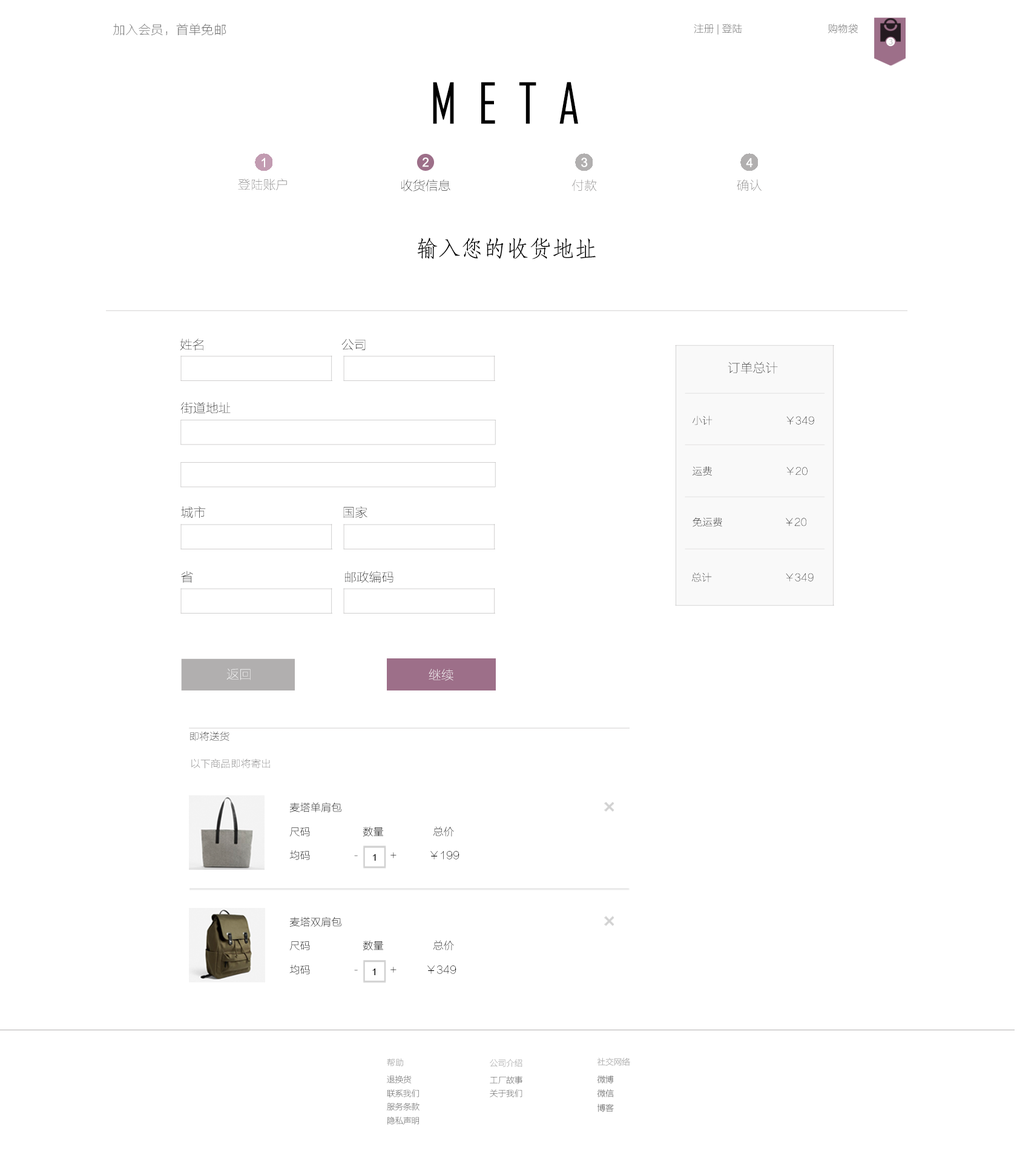
<style>
.page{position:relative;width:1017px;height:1172px;background:#ffffff}
.page>*{position:absolute;margin:0}
.t1{font:12.6px "FZLTCXHJW--GB1-0";color:#666666}
.t2{font:10.1px "FZLTCXHJW--GB1-0";color:#666666}
.t3{font:10.3px "ArialMT";color:#666666}
.t4{font:7.6px "Arial-BoldMT";color:#d1d1d1}
.t5{font:54px "AgencyFB-Reg";color:#000000}
.t6{font:12.6px "ArialMT";color:#ffffff}
.t7{font:12.6px "FZLTCXHJW--GB1-0";color:#7c7a7a}
.t8{font:12.6px "FZLTCXHJW--GB1-0";color:#000000}
.t9{font:12.6px "FZLTCXHJW--GB1-0"}
.t10{font:22.7px "STFangsong";color:#000000}
.t11{font:12.6px "FZLTCXHJW--GB1-0";color:#232323}
.t12{font:12.6px "FZLTCXHJW--GB1-0";color:#212121}
.t13{font:10.1px "FZLTCXHJW--GB1-0";color:#212121}
.t14{font:10.1px "FZLTCXHJW--GB1-0"}
.t15{font:12.6px "FZLTCXHJW--GB1-0";color:#ffffff}
.t16{font:10.1px "FZLTCXHJW--GB1-0";color:#232323}
.t17{font:10.1px "FZLTCXHJW--GB1-0";color:#706f6f}
.t18{font:10.5px/24px "FZLTCXHJW--GB1-0";color:#000000}
.t19{font:9px "ArialMT";color:#000000}
.t20{font:8.5px/13.7px "FZLTCXHJW--GB1-0";letter-spacing:-0.04em;color:#666666}
.t21{font:8.5px/17.1px "FZLTCXHJW--GB1-0";letter-spacing:0.03em;color:#999999}
.t22{font:8.5px/13.7px "FZLTCXHJW--GB1-0";letter-spacing:-0.04em}
.t23{font:8.5px/17.1px "FZLTCXHJW--GB1-0";letter-spacing:-0.04em}
</style>
<div class="page">
<p class="t1" style="left:113px;top:24px;width:114px;height:12px">加入会员，首单免邮</p>
<p class="t2" style="left:694px;top:24px;width:164px;height:11px"><span class="t3"> </span>注册 | 登陆                           购物袋</p>
<p class="t4" style="left:889px;top:39px;width:4px;height:6px">3</p>
<p class="t5" style="left:433px;top:82px;width:145px;height:42px">M  E  T  A</p>
<p class="t6" style="left:262px;top:157px;width:3px;height:10px">1</p>
<p class="t6" style="left:422px;top:157px;width:7px;height:10px">2</p>
<p class="t6" style="left:581px;top:157px;width:7px;height:10px">3</p>
<p class="t6" style="left:746px;top:158px;width:7px;height:9px">4</p>
<p class="t7" style="left:238px;top:179px;width:49px;height:11px">登陆账户</p>
<p class="t8" style="left:401px;top:179px;width:50px;height:12px">收货信息</p>
<p class="t9" style="left:572px;top:179px;width:25px;height:12px">付款</p>
<p class="t7" style="left:737px;top:179px;width:25px;height:12px">确认</p>
<p class="t10" style="left:417px;top:237px;width:179px;height:22px">输入您的收货地址</p>
<p class="t11" style="left:180px;top:339px;width:186px;height:12px">姓名                                       公司</p>
<p class="t12" style="left:728px;top:362px;width:50px;height:12px">订单总计</p>
<p class="t11" style="left:180px;top:402px;width:51px;height:12px">街道地址</p>
<p class="t13" style="left:693px;top:415px;width:122px;height:10px">小计                          ￥349</p>
<p class="t14" style="left:693px;top:466px;width:115px;height:10px">运费                          ￥20</p>
<p class="t11" style="left:181px;top:506px;width:187px;height:12px">城市                                       国家</p>
<p class="t13" style="left:693px;top:517px;width:114px;height:10px">免运费                      ￥20</p>
<p class="t8" style="left:181px;top:571px;width:213px;height:12px">省                                           邮政编码</p>
<p class="t13" style="left:692px;top:572px;width:122px;height:10px">总计                          ￥349</p>
<p class="t15" style="left:227px;top:669px;width:24px;height:11px">返回</p>
<p class="t15" style="left:429px;top:669px;width:25px;height:12px">继续</p>
<p class="t16" style="left:190px;top:731px;width:40px;height:10px">即将送货</p>
<p class="t17" style="left:191px;top:758px;width:79px;height:11px">以下商品即将寄出</p>
<p class="t18" style="left:290px;top:802px;width:170px;height:58px">麦塔单肩包<br>尺码                  数量                 总价<br>均码               -           +           ￥199</p>
<p class="t19" style="left:373px;top:854px;width:3px;height:7px">1</p>
<p class="t18" style="left:290px;top:916px;width:167px;height:58px">麦塔双肩包<br>尺码                  数量                 总价<br>均码               -           +          ￥349</p>
<p class="t19" style="left:372px;top:968px;width:4px;height:7px">1</p>
<p class="t20" style="left:387px;top:1058px;width:33px;height:67px"><span class="t21">帮助<br></span>退换货<br>联系我们<br>服务条款<br>隐私声明</p>
<p class="t22" style="left:490px;top:1059px;width:33px;height:38px"><span class="t23">公司介绍<br></span>工厂故事<br>关于我们</p>
</div>
